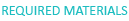
<style>
.page{position:relative;width:129px;height:21px;background:#ffffff}
.page>*{position:absolute;margin:0}
.t1{font:14px "Calibri";color:#1dbdc0}
</style>
<div class="page">
<p class="t1" style="left:2px;top:6px;width:126px;height:10px">REQUIRED MATERIALS</p>
</div>
